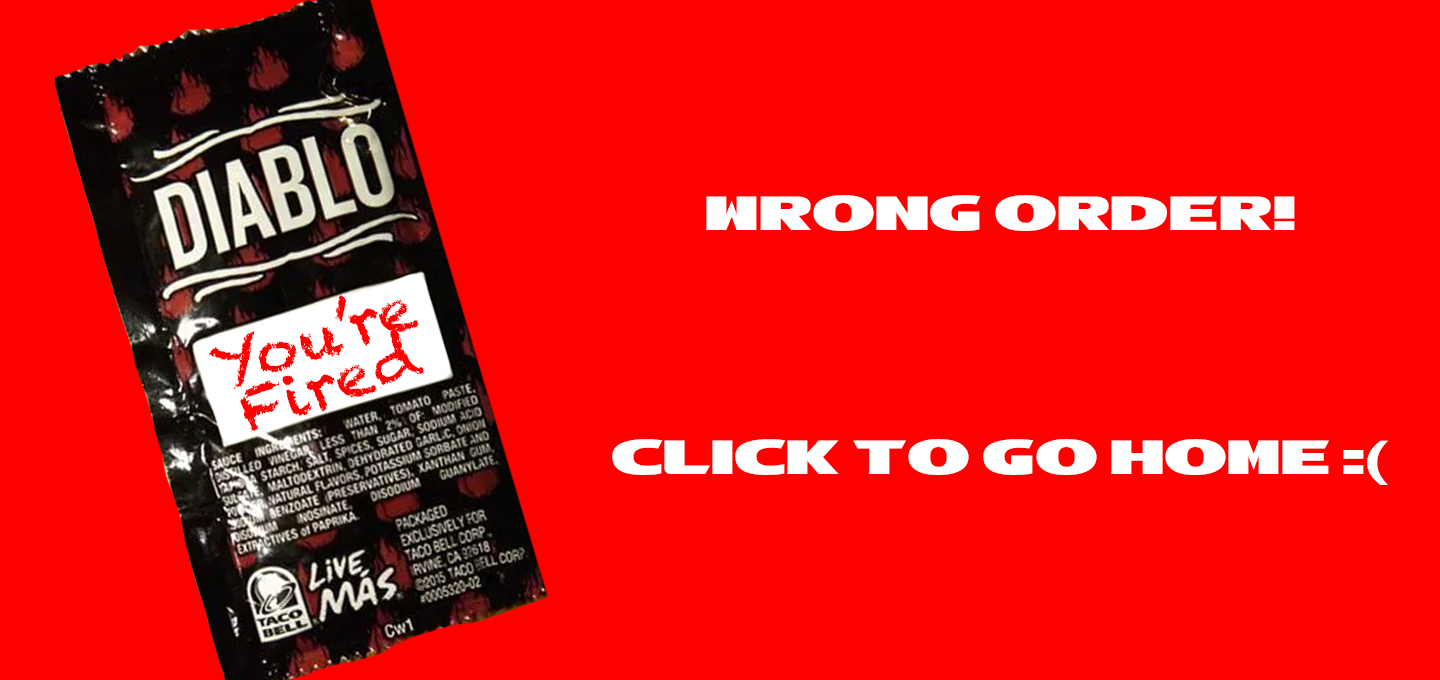
<style>
.page{position:relative;width:1440px;height:680px;background:#ff0000}
.page>*{position:absolute;margin:0}
.t1{font:48px "TacoBell-Bold";color:#ffffff}
.t2{font:60px/48px "Chalkduster";color:#ff0000}
.t3{font:48px "TacoBell-Bold";color:#feffff}
</style>
<div class="page">
<p class="t1" style="left:706px;top:195px;width:589px;height:36px">WRONG ORDER!</p>
<p class="t2" style="left:209px;top:295px;width:215px;height:138px;text-align:center;rotate:-19deg">You’re<br>Fired</p>
<p class="t3" style="left:612px;top:439px;width:776px;height:46px">CLICK TO GO HOME :(</p>
</div>
